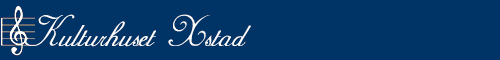
<style>
.page{position:relative;width:500px;height:60px;background:#003366}
.page>*{position:absolute;margin:0}
.t1{font:50px "AdineKirnberg-Script";color:#ffffff}
</style>
<div class="page">
<p class="t1" style="left:24px;top:14px;width:227px;height:33px">Kulturhuset Xstad</p>
</div>
